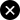
<style>
.page{position:relative;width:20px;height:20px;background:#000000}
.page>*{position:absolute;margin:0}
.t1{font:20px "Lato-Regular";color:#ffffff}
</style>
<div class="page">
<p class="t1" style="left:5px;top:6px;width:10px;height:9px">×</p>
</div>
